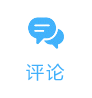
<style>
.page{position:relative;width:92px;height:98px;background:#ffffff}
.page>*{position:absolute;margin:0}
.t1{font:18px "MicrosoftYaHei";letter-spacing:0.12em;color:#42b0fb}
</style>
<div class="page">
<p class="t1" style="left:26px;top:63px;width:39px;height:18px">评论</p>
</div>
